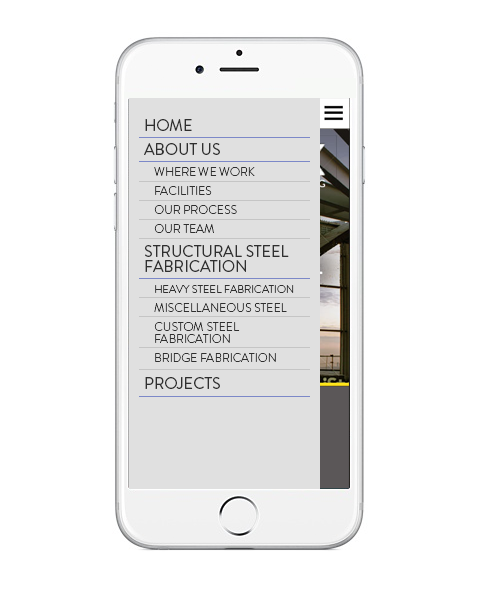
<style>
.page{position:relative;width:478px;height:595px;background:#ffffff}
.page>*{position:absolute;margin:0}
.t1{font:12px/19px "BrandonGrotesque-Light";color:#2f2f2f;text-transform:uppercase}
.t2{font:16px "BrandonGrotesque-Regular";color:#2f2f2f;text-transform:uppercase}
.t3{font:16px/24px "BrandonGrotesque-Regular";color:#2f2f2f;text-transform:uppercase}
.t4{font:12px/21px "BrandonGrotesque-Light";color:#2f2f2f;text-transform:uppercase}
.t5{font:16px/15px "BrandonGrotesque-Regular";color:#2f2f2f;text-transform:uppercase}
.t6{font:11px/21px "BrandonGrotesque-Light";color:#2f2f2f;text-transform:uppercase}
.t7{font:12px/12px "BrandonGrotesque-Light";color:#2f2f2f;text-transform:uppercase}
.t8{font:16px/27px "BrandonGrotesque-Regular";color:#2f2f2f;text-transform:uppercase}
</style>
<div class="page">
<p class="t1" style="left:144px;top:119px;width:150px;height:270px"><span class="t2">Home<br></span><span class="t3">About Us<br></span><span class="t4">Where We Work<br></span>Facilities<br>Our Process <br>Our Team<br><span class="t3">Structural Steel </span><span class="t5">Fabrication<br></span><span class="t6">Heavy Steel Fabrication<br></span>miscellaneous steel<br>custom steel <br><span class="t7">fabrication<br></span>Bridge fabrication<br><span class="t8">Projects</span></p>
</div>
